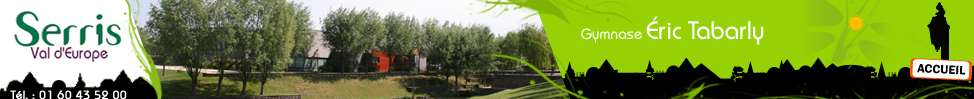
<style>
.page{position:relative;width:974px;height:99px;background:#96d105}
.page>*{position:absolute;margin:0}
.t1{font:25px "DynameSSK";color:#ffffff}
.t2{font:15px "DynameSSK";color:#ffffff}
.t3{font:11.8px "DynameSSK";color:#ffffff;font-weight:bold}
</style>
<div class="page">
<p class="t1" style="left:581px;top:16px;width:183px;height:29px"><span class="t2">Gymnase </span>Éric Tabarly</p>
<p class="t3" style="left:10px;top:90px;width:117px;height:10px">Tél. : 01 60 43 52 00</p>
</div>
